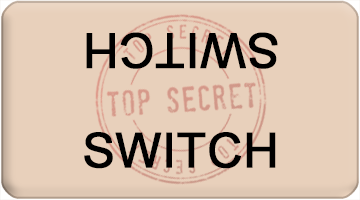
<style>
.page{position:relative;width:360px;height:200px;background:#e8d0bb}
.page>*{position:absolute;margin:0}
.t1{font:48px "ArialMT";color:#000000;font-weight:bold}
</style>
<div class="page">
<p class="t1" style="left:86px;top:32px;width:192px;height:37px;rotate:180deg">SWITCH</p>
<p class="t1" style="left:84px;top:132px;width:192px;height:37px">SWITCH</p>
</div>
